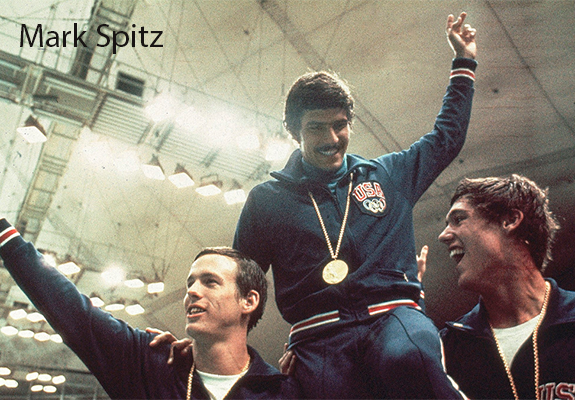
<style>
.page{position:relative;width:575px;height:400px}
.page>*{position:absolute;margin:0}
.t1{font:33.3px "MyriadPro-Regular";color:#181413}
</style>
<div class="page">
<p class="t1" style="left:20px;top:23px;width:143px;height:31px">Mark Spitz</p>
</div>
